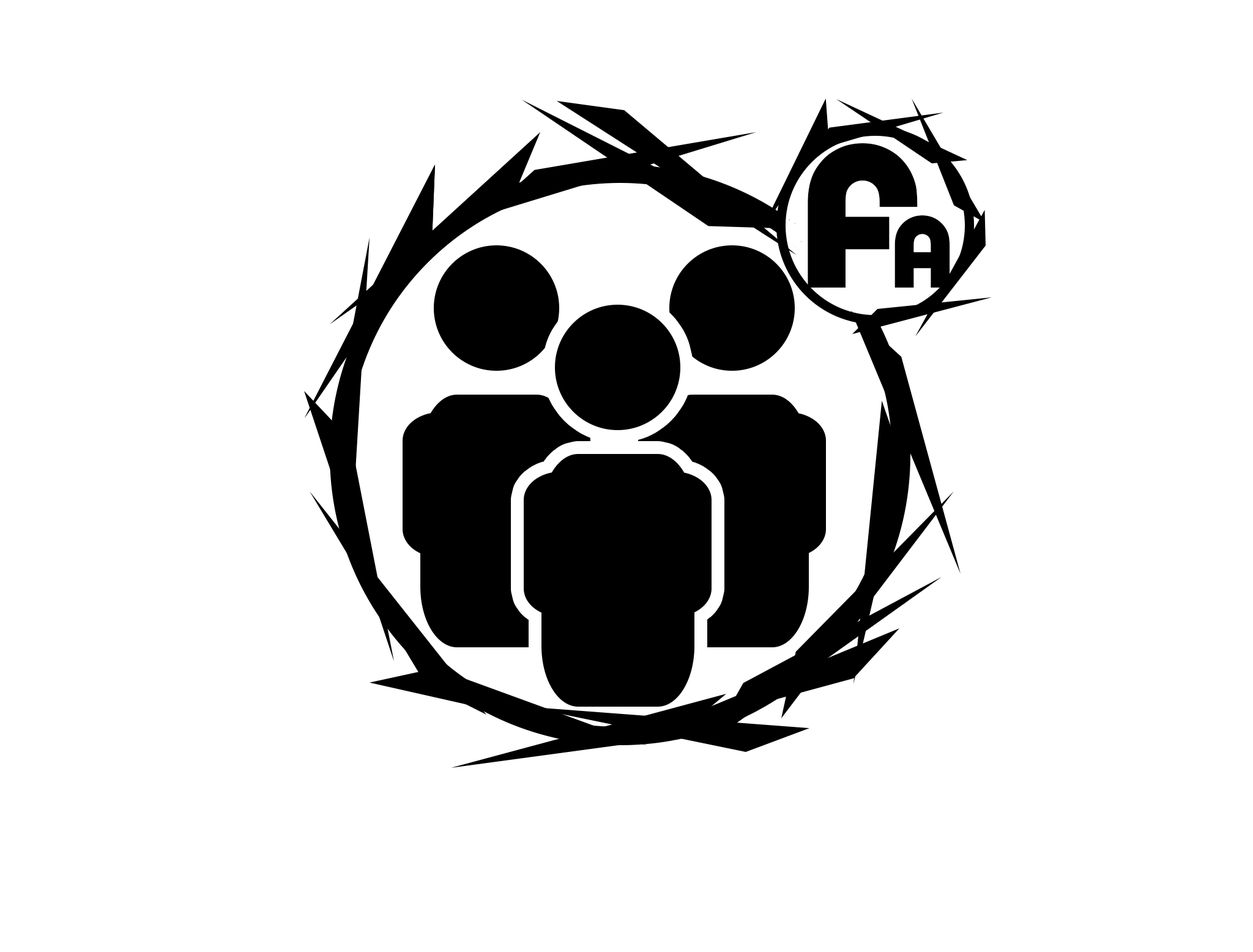
<style>
.page{position:relative;width:1253px;height:952px;background:#ffffff}
.page>*{position:absolute;margin:0}
.t1{font:212.3px "PumpDemiBoldLetPlain";color:#000000}
.t2{font:106.2px "PumpDemiBoldLetPlain";color:#000000}
</style>
<div class="page">
<p class="t1" style="left:807px;top:143px;width:111px;height:145px">F</p>
<p class="t2" style="left:894px;top:215px;width:56px;height:73px">A</p>
</div>
